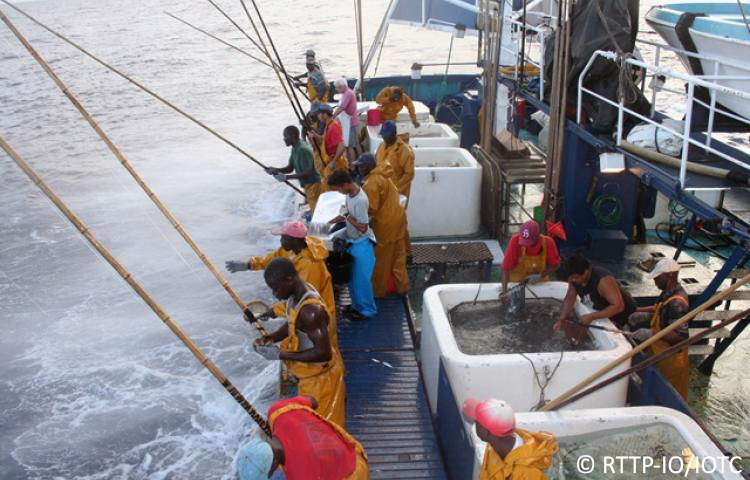
<style>
.page{position:relative;width:750px;height:480px}
.page>*{position:absolute;margin:0}
.t1{font:26px "Calibri";color:#ffffff}
</style>
<div class="page">
<p class="t1" style="left:577px;top:454px;width:165px;height:23px">© RTTP-IO/IOTC</p>
</div>
